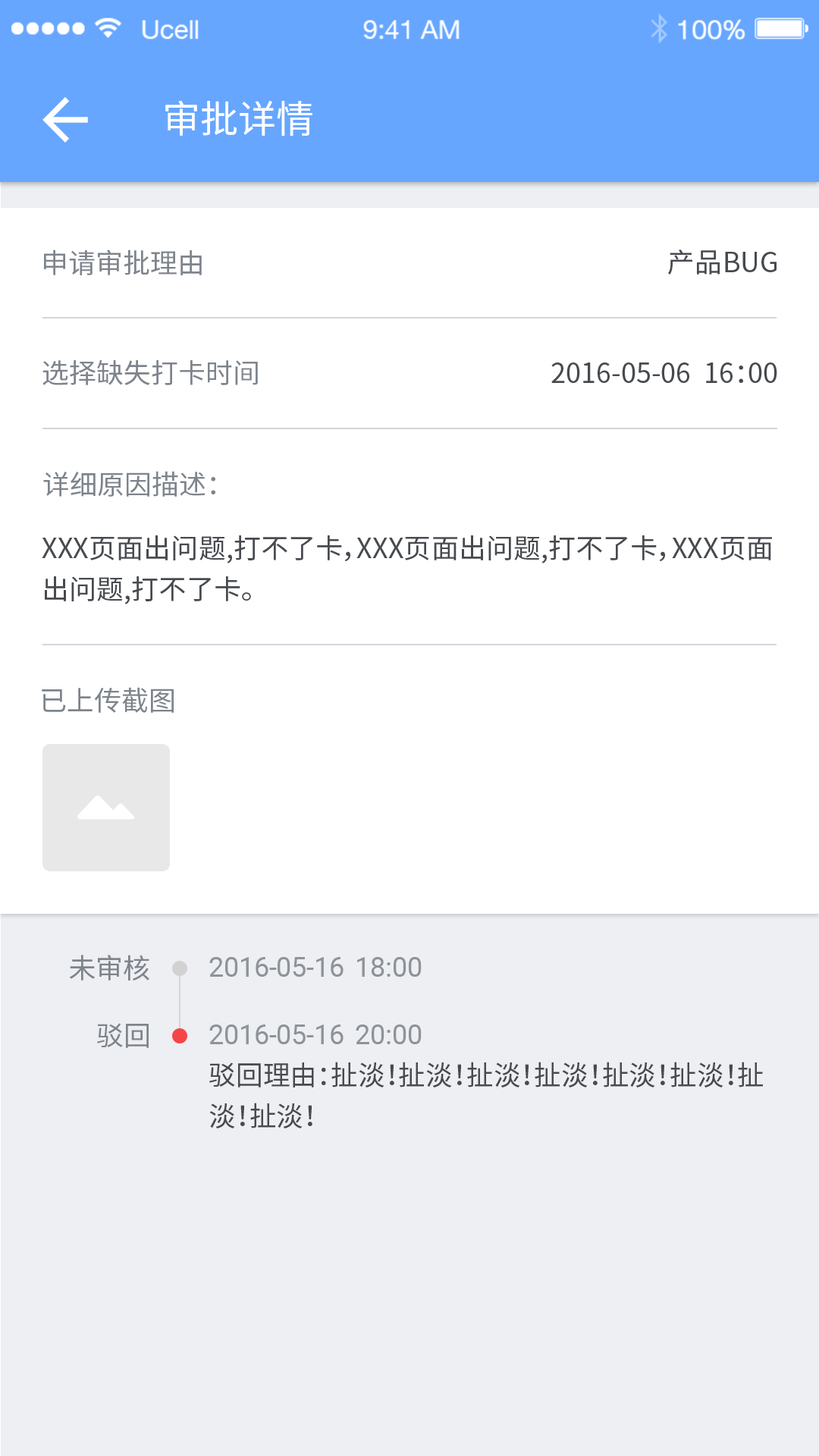
<style>
.page{position:relative;width:819px;height:1456px;background:#ffffff}
.page>*{position:absolute;margin:0}
.t1{font:37.9px "NotoSansHans-Regular";color:#ffffff}
.t2{font:27.3px "NotoSansHans-Regular";color:#7e848c}
.t3{font:27.3px "NotoSansHans-Regular";color:#474a4f}
.t4{font:27.2px "NotoSansHans-Regular";color:#7e848c}
.t5{font:27.3px/40.9px "NotoSansHans-Regular";color:#474a4f}
.t6{font:27.4px "NotoSansHans-Regular";color:#7e848c}
.t7{font:27.7px "NotoSansHans-Regular";color:#7e848c}
.t8{font:27.4px "Roboto-Regular";color:#8d9399}
.t9{font:27.4px/40.9px "NotoSansHans-Regular";color:#474a4f}
</style>
<div class="page">
<p class="t1" style="left:165px;top:100px;width:147px;height:36px">审批详情</p>
<p class="t2" style="left:44px;top:249px;width:158px;height:26px">申请审批理由</p>
<p class="t3" style="left:668px;top:249px;width:109px;height:26px">产品BUG</p>
<p class="t4" style="left:42px;top:359px;width:216px;height:26px">选择缺失打卡时间</p>
<p class="t3" style="left:551px;top:362px;width:226px;height:21px">2016-05-06  16：00</p>
<p class="t2" style="left:43px;top:471px;width:172px;height:26px">详细原因描述：</p>
<p class="t5" style="left:42px;top:535px;width:730px;height:69px">XXX页面出问题,打不了卡，XXX页面出问题,打不了卡，XXX页面<br>出问题,打不了卡。</p>
<p class="t6" style="left:42px;top:687px;width:132px;height:26px">已上传截图</p>
<p class="t7" style="left:69px;top:955px;width:80px;height:26px">未审核</p>
<p class="t8" style="left:209px;top:957px;width:213px;height:20px">2016-05-16  18:00</p>
<p class="t7" style="left:97px;top:1023px;width:52px;height:25px">驳回</p>
<p class="t8" style="left:209px;top:1024px;width:213px;height:20px">2016-05-16  20:00</p>
<p class="t9" style="left:209px;top:1062px;width:554px;height:66px">驳回理由：扯淡！扯淡！扯淡！扯淡！扯淡！扯淡！扯淡！扯淡！</p>
</div>
